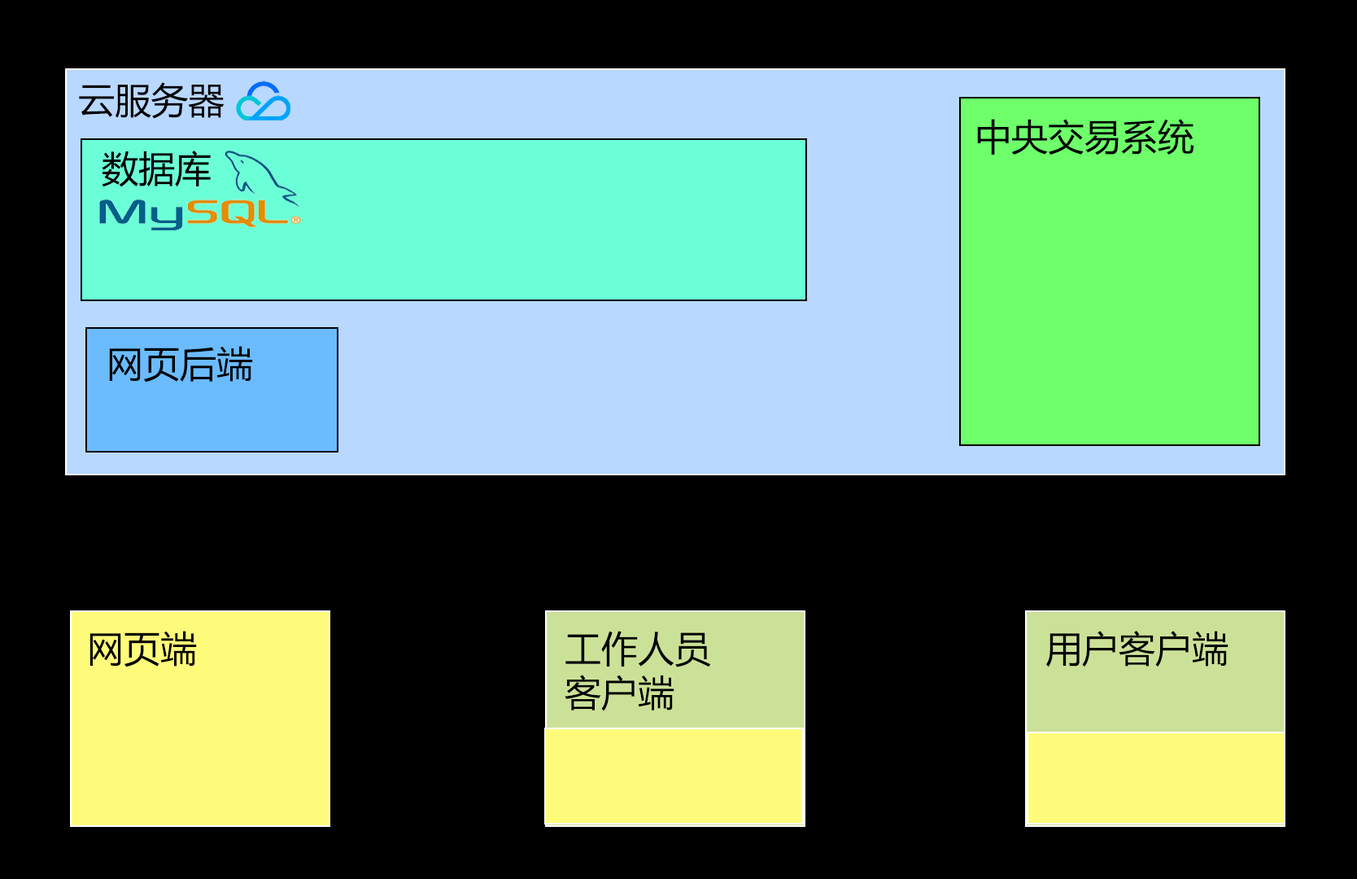
<style>
.page{position:relative;width:1357px;height:879px;background:#000000}
.page>*{position:absolute;margin:0}
.t1{font:36.6px "MicrosoftYaHei";color:#000000}
.t2{font:36.6px/14.8px "MicrosoftYaHei";color:#000000}
</style>
<div class="page">
<p class="t1" style="left:79px;top:82px;width:146px;height:37px">云服务器</p>
<p class="t1" style="left:977px;top:119px;width:217px;height:36px">中央交易系统</p>
<p class="t1" style="left:102px;top:151px;width:109px;height:36px">数据库</p>
<p class="t1" style="left:109px;top:346px;width:144px;height:36px">网页后端</p>
<p class="t1" style="left:89px;top:631px;width:108px;height:36px">网页端</p>
<p class="t2" style="left:565px;top:631px;width:146px;height:80px">工作人员<br><br><br>客户端</p>
<p class="t1" style="left:1046px;top:631px;width:183px;height:36px">用户客户端</p>
</div>
